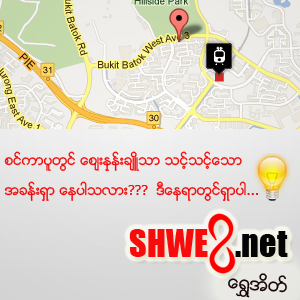
<style>
.page{position:relative;width:300px;height:300px}
.page>*{position:absolute;margin:0}
.t1{font:14px/30px "Zawgyi-One";color:#f70b0b}
.t2{font:18px "Zawgyi-One";color:#160404}
</style>
<div class="page">
<p class="t1" style="left:4px;top:151px;width:254px;height:50px">စင္ကာပူတြင္ ေစ်းႏွုန္းခ်ဴိသာ သင့္သင့္ေသာ<br>အခန္းရွာ ေနပါသလား???  ဒီေနရာတြင္ရွာပါ...</p>
<p class="t2" style="left:228px;top:273px;width:59px;height:25px;rotate:5deg">ေရႊအိတ္</p>
</div>
